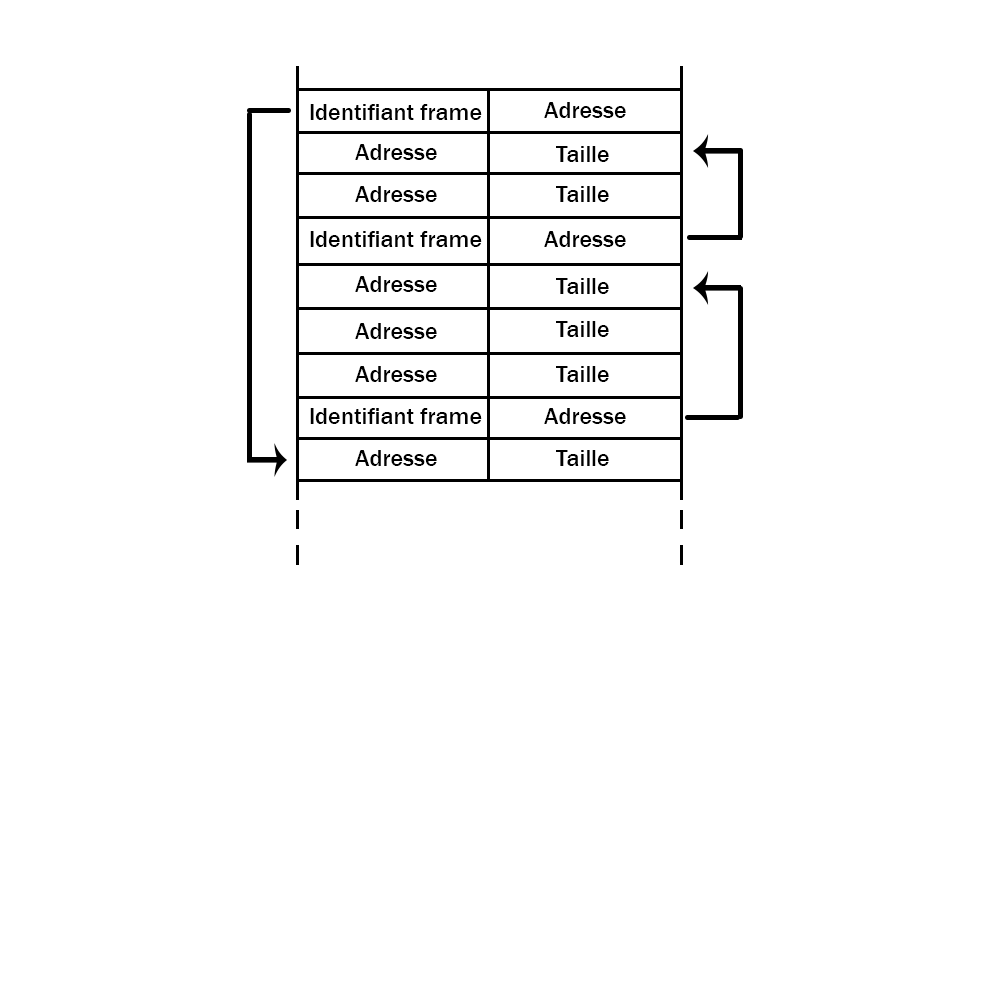
<style>
.page{position:relative;width:1000px;height:1000px;background:#ffffff}
.page>*{position:absolute;margin:0}
.t1{font:24px "FranklinGothic-Medium";color:#000000}
</style>
<div class="page">
<p class="t1" style="left:544px;top:102px;width:82px;height:16px">Adresse</p>
<p class="t1" style="left:310px;top:104px;width:172px;height:16px">Identifiant frame</p>
<p class="t1" style="left:355px;top:144px;width:82px;height:16px">Adresse</p>
<p class="t1" style="left:556px;top:146px;width:53px;height:16px">Taille</p>
<p class="t1" style="left:355px;top:186px;width:82px;height:16px">Adresse</p>
<p class="t1" style="left:556px;top:186px;width:53px;height:16px">Taille</p>
<p class="t1" style="left:310px;top:231px;width:172px;height:16px">Identifiant frame</p>
<p class="t1" style="left:544px;top:231px;width:82px;height:16px">Adresse</p>
<p class="t1" style="left:355px;top:276px;width:82px;height:16px">Adresse</p>
<p class="t1" style="left:556px;top:278px;width:53px;height:16px">Taille</p>
<p class="t1" style="left:355px;top:323px;width:82px;height:16px">Adresse</p>
<p class="t1" style="left:556px;top:321px;width:53px;height:16px">Taille</p>
<p class="t1" style="left:355px;top:366px;width:82px;height:16px">Adresse</p>
<p class="t1" style="left:556px;top:366px;width:53px;height:16px">Taille</p>
<p class="t1" style="left:310px;top:408px;width:172px;height:16px">Identifiant frame</p>
<p class="t1" style="left:544px;top:408px;width:82px;height:16px">Adresse</p>
<p class="t1" style="left:355px;top:450px;width:82px;height:16px">Adresse</p>
<p class="t1" style="left:556px;top:450px;width:53px;height:16px">Taille</p>
</div>
